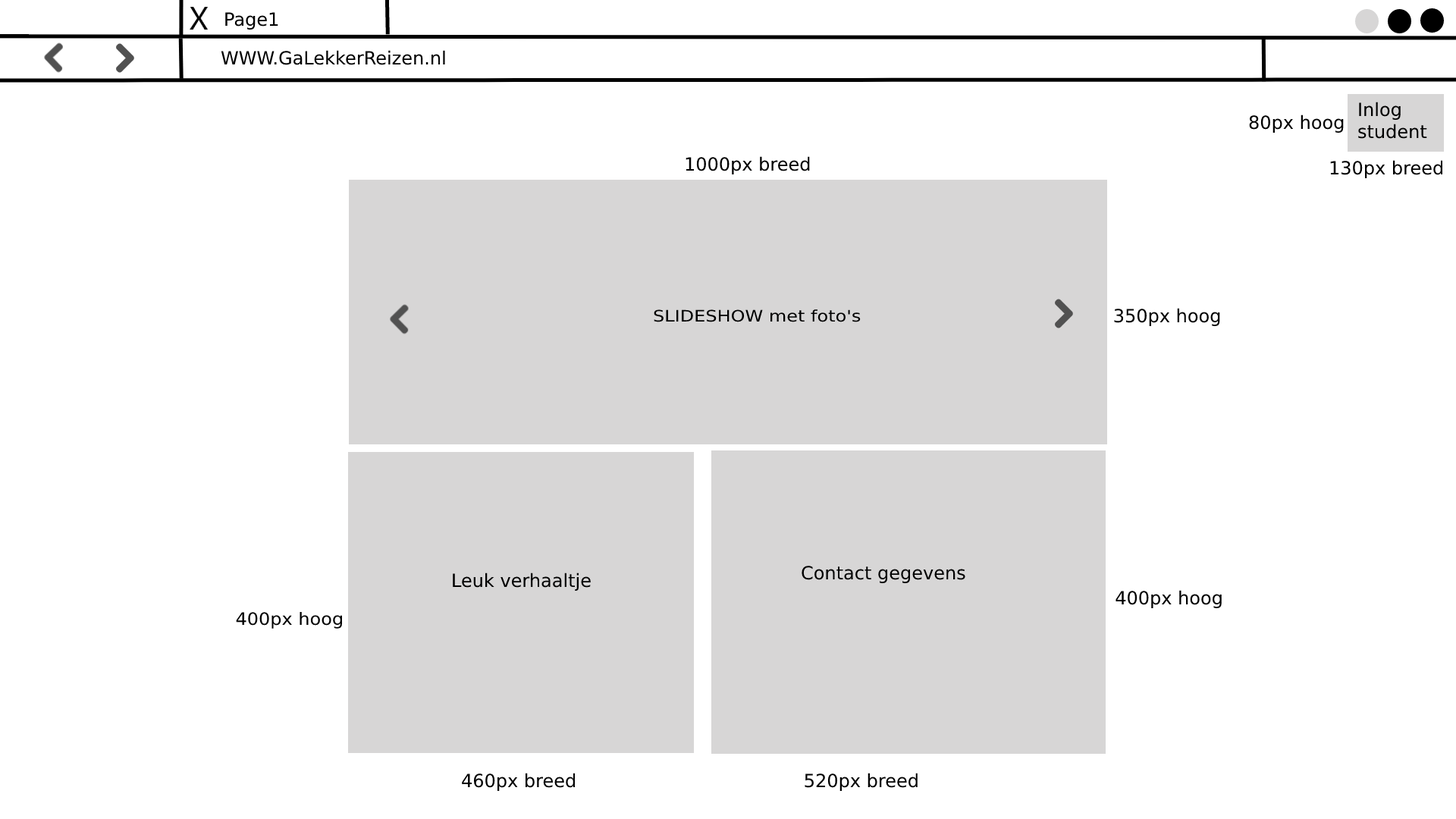
<style>
.page{position:relative;width:1456px;height:819px;background:#ffffff}
.page>*{position:absolute;margin:0}
.t1{font:18.2px "DejaVuSans";color:#000000}
.t2{font:15.8px "DejaVuSans";color:#000000;scale:1.15 1}
.t3{font:17.1px "DejaVuSans";color:#000000;scale:1.07 1}
</style>
<div class="page">
<p class="t1" style="left:225px;top:12px;width:53px;height:18px">Page1</p>
<p class="t1" style="left:221px;top:50px;width:224px;height:15px">WWW.GaLekkerReizen.nl</p>
<p class="t1" style="left:1358px;top:102px;width:69px;height:37px">Inlog student</p>
<p class="t1" style="left:1249px;top:115px;width:95px;height:18px">80px hoog</p>
<p class="t1" style="left:686px;top:156px;width:124px;height:18px">1000px breed</p>
<p class="t1" style="left:1330px;top:160px;width:113px;height:18px">130px breed</p>
<p class="t2" style="left:654px;top:309px;width:207px;height:13px">SLIDESHOW met foto's</p>
<p class="t1" style="left:1114px;top:308px;width:106px;height:18px">350px hoog</p>
<p class="t1" style="left:802px;top:566px;width:163px;height:17px">Contact gegevens</p>
<p class="t1" style="left:453px;top:573px;width:138px;height:18px">Leuk verhaaltje</p>
<p class="t1" style="left:1115px;top:590px;width:107px;height:18px">400px hoog</p>
<p class="t3" style="left:236px;top:612px;width:106px;height:17px">400px hoog</p>
<p class="t1" style="left:462px;top:773px;width:114px;height:18px">460px breed</p>
<p class="t1" style="left:805px;top:773px;width:113px;height:18px">520px breed</p>
</div>
